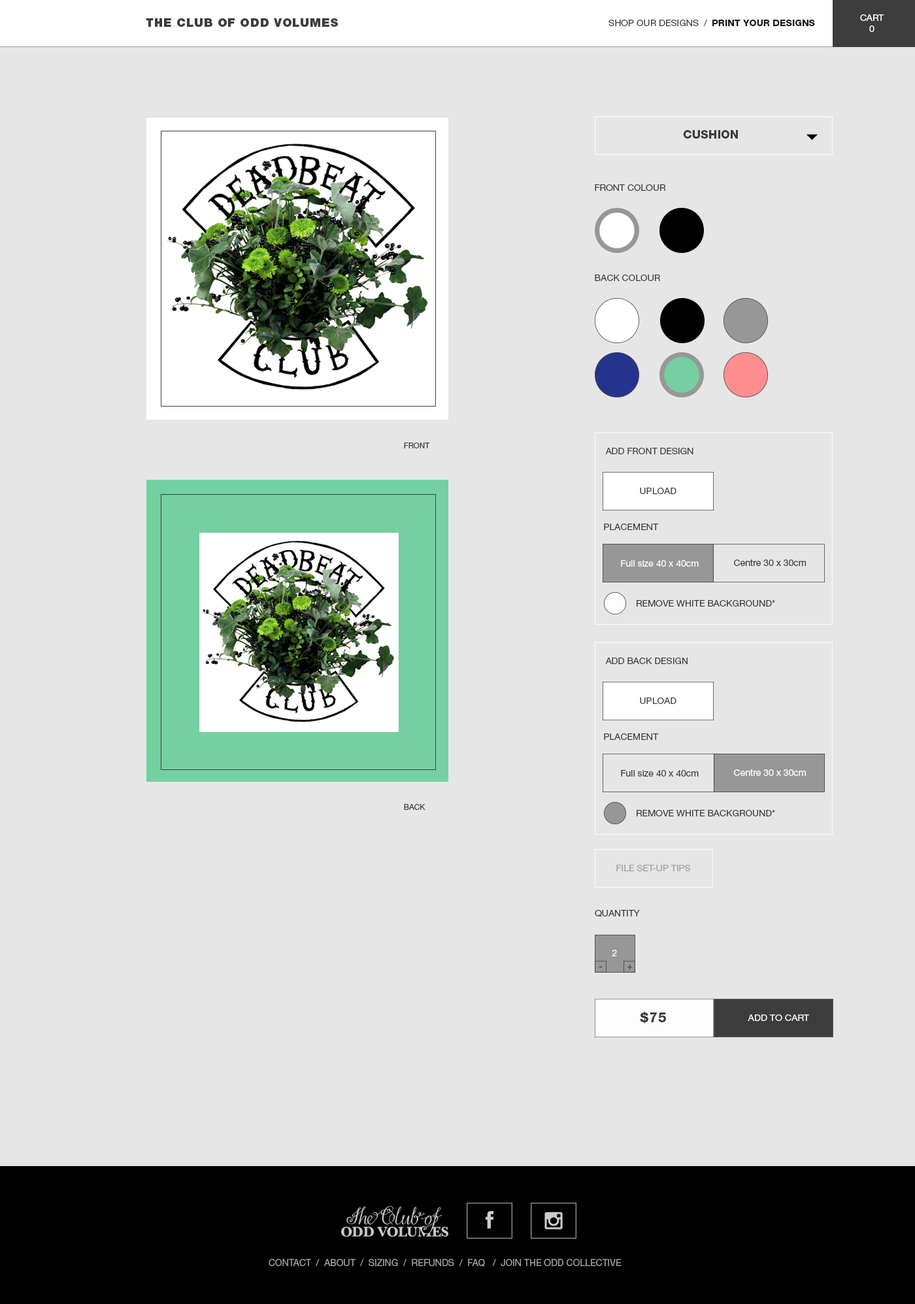
<style>
.page{position:relative;width:915px;height:1304px;background:#e6e6e6}
.page>*{position:absolute;margin:0}
.t1{font:9.1px "HelveticaNeueLTStd-Roman";color:#ffffff}
.t2{font:11.8px "HelveticaNeueLTStd-Blk";letter-spacing:0.05em;color:#3d3d3d}
.t3{font:9.1px "HelveticaNeueLTStd-Roman";color:#3d3d3d}
.t4{font:9.1px "HelveticaNeueLTStd-Hv";color:#1b1b1b}
.t5{font:11.8px "HelveticaNeueLTStd-Hv";color:#3d3d3d}
.t6{font:9.1px "HelveticaNeueLTStd-Roman";color:#3e3e3e}
.t7{font:7.8px "HelveticaNeueLTStd-Roman";color:#3e3e3e}
.t8{font:9.1px "HelveticaNeueLTStd-Roman";color:#fffcfc}
.t9{font:9.1px "HelveticaNeueLTStd-Roman";color:#a0a0a0}
.t10{font:9px "HelveticaNeueLTStd-Roman";color:#ffffff}
.t11{font:9px "HelveticaNeueLTStd-Roman";color:#3e3e3e}
.t12{font:13.1px "HelveticaNeueLTStd-Hv";letter-spacing:0.05em;color:#3d3d3d}
.t13{font:9.1px "HelveticaNeueLTStd-Roman";color:#faf9f9}
.t14{font:9.4px "HelveticaNeueLTStd-Roman";color:#9b9b9b}
</style>
<div class="page">
<p class="t1" style="left:860px;top:14px;width:24px;height:18px;text-align:center">CART<br>0</p>
<p class="t2" style="left:146px;top:18px;width:192px;height:9px">THE CLUB OF ODD VOLUMES</p>
<p class="t3" style="left:608px;top:20px;width:207px;height:6px">SHOP OUR DESIGNS  /  <span class="t4">PRINT YOUR DESIGNS</span></p>
<p class="t5" style="left:683px;top:130px;width:55px;height:9px">CUSHION</p>
<p class="t6" style="left:595px;top:184px;width:71px;height:7px">FRONT COLOUR</p>
<p class="t6" style="left:595px;top:274px;width:65px;height:7px">BACK COLOUR</p>
<p class="t7" style="left:404px;top:442px;width:26px;height:6px">FRONT</p>
<p class="t6" style="left:605px;top:448px;width:88px;height:6px">ADD FRONT DESIGN</p>
<p class="t6" style="left:640px;top:487px;width:36px;height:7px">UPLOAD</p>
<p class="t6" style="left:604px;top:523px;width:55px;height:7px">PLACEMENT</p>
<p class="t8" style="left:621px;top:560px;width:77px;height:7px">Full size 40 x 40cm</p>
<p class="t6" style="left:734px;top:559px;width:72px;height:7px">Centre 30 x 30cm</p>
<p class="t6" style="left:636px;top:600px;width:139px;height:6px">REMOVE WHITE BACKGROUND*</p>
<p class="t6" style="left:605px;top:657px;width:82px;height:7px">ADD BACK DESIGN</p>
<p class="t6" style="left:640px;top:697px;width:36px;height:7px">UPLOAD</p>
<p class="t6" style="left:604px;top:733px;width:55px;height:7px">PLACEMENT</p>
<p class="t3" style="left:621px;top:770px;width:77px;height:6px">Full size 40 x 40cm</p>
<p class="t1" style="left:734px;top:768px;width:72px;height:8px">Centre 30 x 30cm</p>
<p class="t7" style="left:404px;top:804px;width:21px;height:6px">BACK</p>
<p class="t6" style="left:636px;top:810px;width:139px;height:6px">REMOVE WHITE BACKGROUND*</p>
<p class="t9" style="left:616px;top:864px;width:74px;height:7px">FILE SET-UP TIPS</p>
<p class="t6" style="left:595px;top:910px;width:45px;height:7px">QUANTITY</p>
<p class="t10" style="left:612px;top:949px;width:5px;height:7px">2</p>
<p class="t11" style="left:599px;top:966px;width:3px;height:1px">-</p>
<p class="t11" style="left:627px;top:964px;width:5px;height:5px">+</p>
<p class="t12" style="left:640px;top:1011px;width:26px;height:12px">$75</p>
<p class="t13" style="left:747px;top:1014px;width:62px;height:7px">ADD TO CART</p>
<p class="t14" style="left:269px;top:1258px;width:352px;height:8px">CONTACT  /  ABOUT  /  SIZING  /  REFUNDS  /  FAQ   /  JOIN THE ODD COLLECTIVE</p>
</div>
